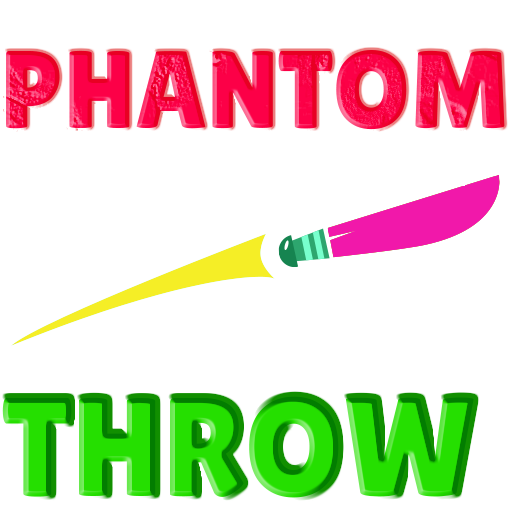
<style>
.page{position:relative;width:512px;height:512px;background:#ffffff}
.page>*{position:absolute;margin:0}
.t1{font:110px "LilitaOne"}
.t2{font:140px "LilitaOne";color:#25df00}
</style>
<div class="page">
<p class="t1" style="left:6px;top:50px;width:499px;height:80px">PHANTOM</p>
<p class="t2" style="left:2px;top:396px;width:472px;height:102px">THROW</p>
</div>
